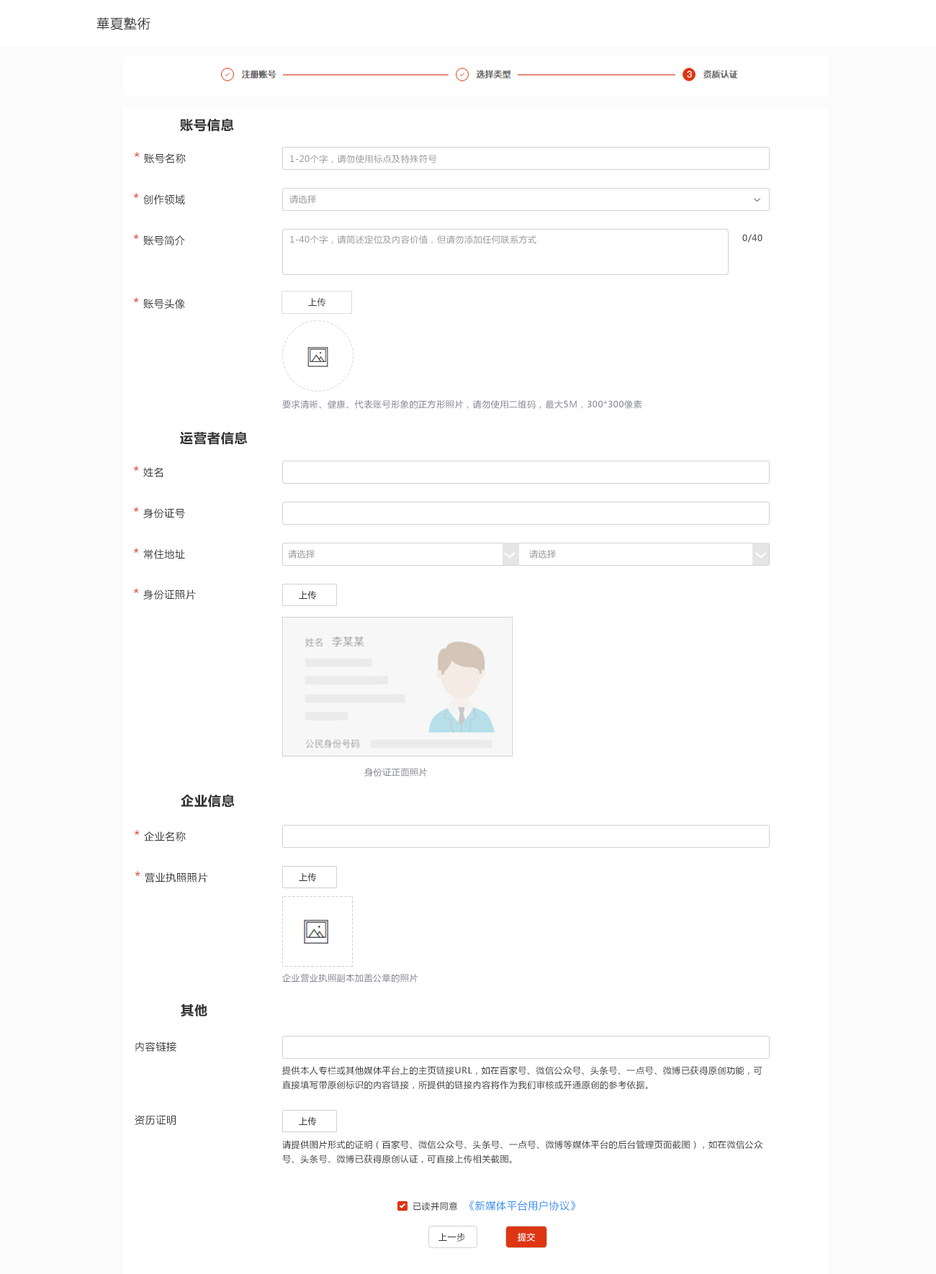
<style>
.page{position:relative;width:936px;height:1274px;background:#ffffff}
.page>*{position:absolute;margin:0}
.t1{font:13px "MicrosoftYaHei";letter-spacing:0.05em;color:#333333}
.t2{font:13px "MicrosoftYaHei-Bold";letter-spacing:0.05em;color:#333333}
.t3{font:10.1px "MicrosoftYaHei";letter-spacing:0.05em;color:#333333}
.t4{font:13px "MicrosoftYaHei";letter-spacing:0.05em;color:#de3612}
.t5{font:8.6px "MicrosoftYaHei";letter-spacing:0.05em;color:#999999}
.t6{font:8.6px "MicrosoftYaHei";letter-spacing:0.05em;color:#333333}
.t7{font:8.6px "MicrosoftYaHei";letter-spacing:0.05em;color:#818490}
.t8{font:12.8px "MicrosoftYaHei-Bold";letter-spacing:0.05em;color:#ffffff}
.t9{font:8.6px/14.4px "MicrosoftYaHei";letter-spacing:0.05em;color:#333333}
.t10{font:10.1px "MicrosoftYaHei";letter-spacing:0.05em;color:#2d8cf0}
.t11{font:8.6px "MicrosoftYaHei";letter-spacing:0.05em;color:#ffffff}
</style>
<div class="page">
<p class="t1" style="left:96px;top:17px;width:54px;height:13px">華夏塾術</p>
<p class="t2" style="left:180px;top:119px;width:54px;height:13px">账号信息</p>
<p class="t3" style="left:134px;top:152px;width:52px;height:11px"><span class="t4">*</span> 账号名称</p>
<p class="t5" style="left:290px;top:154px;width:147px;height:9px">1-20个字，请勿使用标点及特殊符号</p>
<p class="t3" style="left:133px;top:193px;width:52px;height:11px"><span class="t4">*</span> 创作领域</p>
<p class="t5" style="left:289px;top:195px;width:27px;height:9px">请选择</p>
<p class="t3" style="left:133px;top:234px;width:52px;height:11px"><span class="t4">*</span> 账号简介</p>
<p class="t6" style="left:742px;top:234px;width:20px;height:9px">0/40</p>
<p class="t5" style="left:290px;top:235px;width:246px;height:9px">1-40个字，请简述定位及内容价值，但请勿添加任何联系方式</p>
<p class="t3" style="left:133px;top:297px;width:52px;height:12px"><span class="t4">*</span> 账号头像</p>
<p class="t6" style="left:308px;top:298px;width:18px;height:9px">上传</p>
<p class="t7" style="left:282px;top:400px;width:360px;height:9px">要求清晰、健康、代表账号形象的正方形照片，请勿使用二维码，最大5M，300*300像素</p>
<p class="t2" style="left:180px;top:431px;width:68px;height:14px">运营者信息</p>
<p class="t3" style="left:133px;top:466px;width:30px;height:11px"><span class="t4">*</span> 姓名</p>
<p class="t3" style="left:133px;top:507px;width:52px;height:11px"><span class="t4">*</span> 身份证号</p>
<p class="t3" style="left:133px;top:548px;width:52px;height:11px"><span class="t4">*</span> 常住地址</p>
<p class="t5" style="left:288px;top:550px;width:27px;height:9px">请选择</p>
<p class="t8" style="left:504px;top:552px;width:11px;height:7px;rotate:-90deg">ㄑ</p>
<p class="t5" style="left:529px;top:550px;width:27px;height:9px">请选择</p>
<p class="t8" style="left:755px;top:552px;width:12px;height:7px;rotate:-90deg">ㄑ</p>
<p class="t3" style="left:133px;top:588px;width:63px;height:12px"><span class="t4">*</span> 身份证照片</p>
<p class="t7" style="left:364px;top:768px;width:64px;height:9px">身份证正面照片</p>
<p class="t2" style="left:181px;top:795px;width:54px;height:13px">企业信息</p>
<p class="t3" style="left:134px;top:830px;width:52px;height:12px"><span class="t4">*</span> 企业名称</p>
<p class="t3" style="left:135px;top:871px;width:73px;height:12px"><span class="t4">*</span> 营业执照照片</p>
<p class="t7" style="left:282px;top:973px;width:136px;height:10px">企业营业执照副本加盖公章的照片</p>
<p class="t2" style="left:181px;top:1004px;width:26px;height:13px">其他</p>
<p class="t3" style="left:135px;top:1042px;width:41px;height:10px">内容链接</p>
<p class="t9" style="left:282px;top:1066px;width:480px;height:24px">提供本人专栏或其他媒体平台上的主页链接URL，如在百家号、微信公众号、头条号、一点号、微博已获得原创功能，可直接填写带原创标识的内容链接，所提供的链接内容将作为我们审核或开通原创的参考依据。</p>
<p class="t3" style="left:135px;top:1115px;width:41px;height:10px">资历证明</p>
<p class="t9" style="left:282px;top:1140px;width:481px;height:24px">请提供图片形式的证明（百家号、微信公众号、头条号、一点号、微博等媒体平台的后台管理页面截图），如在微信公众号、头条号、微博已获得原创认证，可直接上传相关截图。</p>
<p class="t6" style="left:413px;top:1202px;width:45px;height:9px">已读并同意</p>
<p class="t10" style="left:469px;top:1201px;width:107px;height:10px">《新媒体平台用户协议》</p>
<p class="t6" style="left:438px;top:1233px;width:27px;height:9px">上一步</p>
<p class="t11" style="left:518px;top:1233px;width:17px;height:9px">提交</p>
</div>
